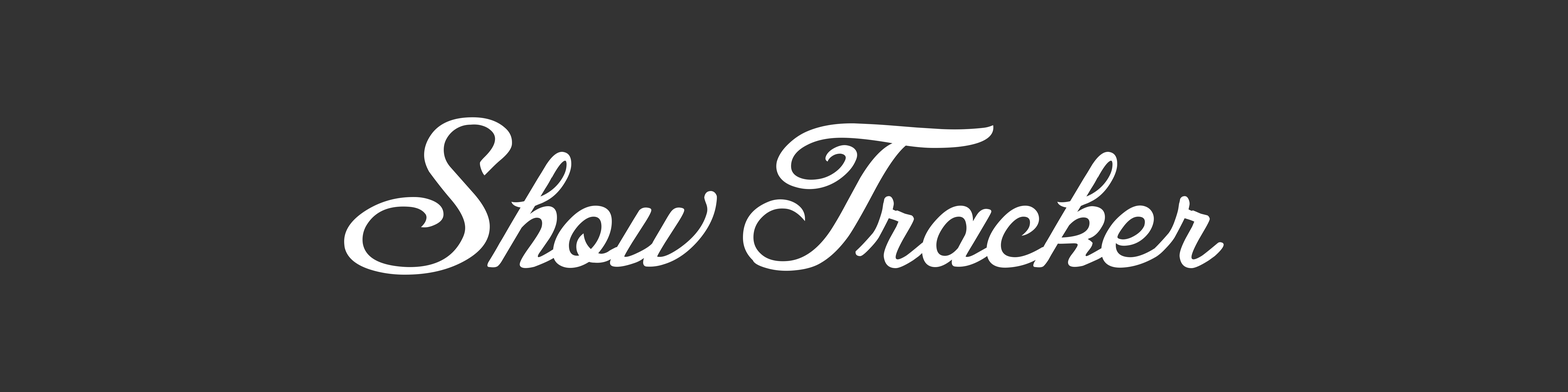
<style>
.page{position:relative;width:1568px;height:392px;background:#333333}
.page>*{position:absolute;margin:0}
.t1{font:261.3px "BlessedDay";color:#ffffff}
</style>
<div class="page">
<p class="t1" style="left:344px;top:117px;width:880px;height:158px">Show Tracker</p>
</div>
